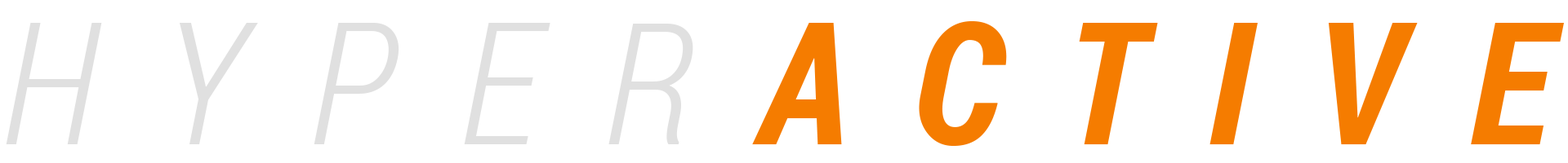
<style>
.page{position:relative;width:1568px;height:163px;background:#ffffff}
.page>*{position:absolute;margin:0}
.t1{font:170.5px "RobotoCondensed-BoldItalic";letter-spacing:0.375em;color:#f57c00}
.t2{font:170.5px "RobotoCondensed-LightItalic";letter-spacing:0.375em;color:#e0e0e0}
</style>
<div class="page">
<p class="t1" style="left:6px;top:21px;width:1558px;height:125px"><span class="t2">HYPER</span>ACTIVE</p>
</div>
